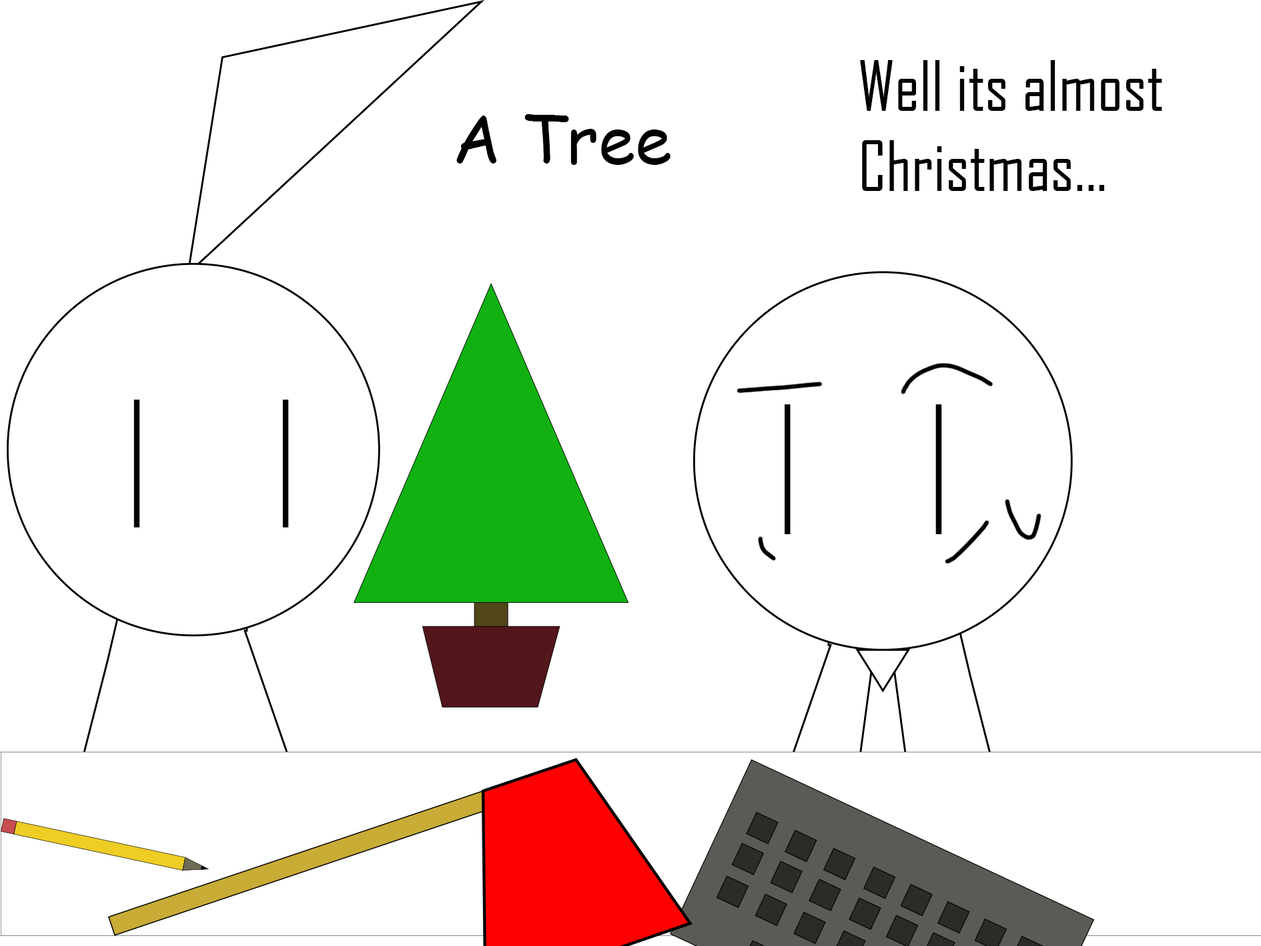
<style>
.page{position:relative;width:1261px;height:946px;background:#ffffff}
.page>*{position:absolute;margin:0}
.t1{font:66.7px "AgencyFB-Reg";color:#000000}
.t2{font:66.7px "ComicSansMS";color:#000000}
</style>
<div class="page">
<p class="t1" style="left:860px;top:60px;width:302px;height:131px">Well its almost Christmas...</p>
<p class="t2" style="left:456px;top:114px;width:215px;height:51px">A Tree</p>
</div>
